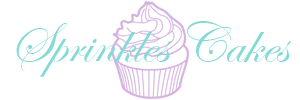
<style>
.page{position:relative;width:300px;height:100px;background:#ffffff}
.page>*{position:absolute;margin:0}
.t1{font:58.3px "EdwardianScriptITC";color:#85dad7}
</style>
<div class="page">
<p class="t1" style="left:16px;top:21px;width:275px;height:56px">Sprinkles Cakes</p>
</div>
